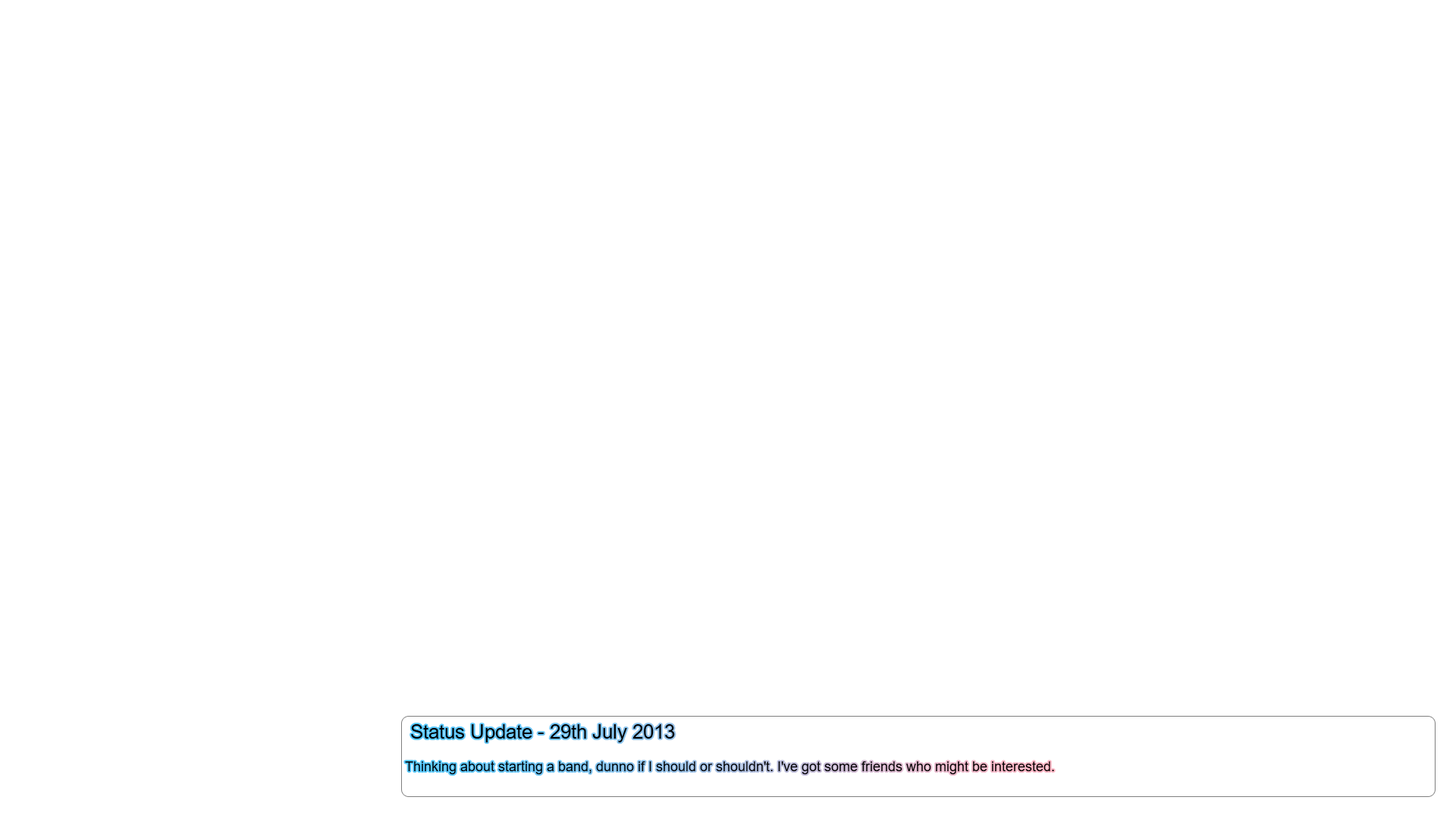
<style>
.page{position:relative;width:1456px;height:819px;background:#ffffff}
.page>*{position:absolute;margin:0}
.t1{font:13.6px "ArialMT";color:#000000}
.t2{font:19.7px "ArialMT";color:#000000}
</style>
<div class="page">
<p class="t1" style="left:405px;top:724px;width:649px;height:50px;text-align:right"><span class="t2">Status Update - 29th July 2013<br></span> <br> Thinking about starting a band, dunno if I should or shouldn't. I've got some friends who might be interested.</p>
</div>
